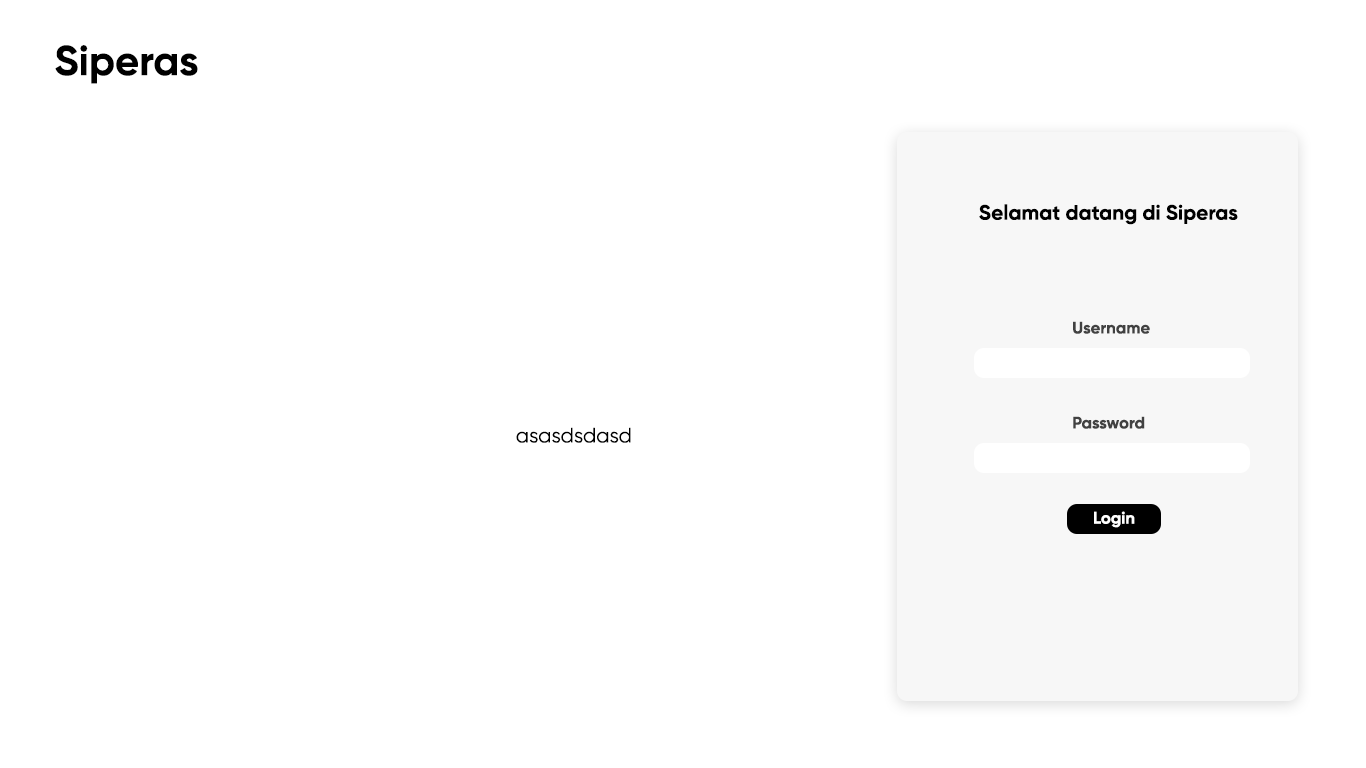
<style>
.page{position:relative;width:1366px;height:768px;background:#ffffff}
.page>*{position:absolute;margin:0}
.t1{font:41.7px "Gilroy-Bold";color:#000000}
.t2{font:20.8px "Gilroy-Bold";color:#000000}
.t3{font:16.7px "Gilroy-Bold";color:#414141}
.t4{font:20.8px "Gilroy-Regular";color:#000000}
.t5{font:16.7px "Gilroy-Bold";color:#ffffff}
</style>
<div class="page">
<p class="t1" style="left:55px;top:45px;width:143px;height:39px">Siperas</p>
<p class="t2" style="left:979px;top:204px;width:259px;height:21px">Selamat datang di Siperas</p>
<p class="t3" style="left:1073px;top:321px;width:77px;height:13px">Username</p>
<p class="t3" style="left:1073px;top:416px;width:72px;height:13px">Password</p>
<p class="t4" style="left:516px;top:427px;width:115px;height:16px">asasdsdasd</p>
<p class="t5" style="left:1094px;top:511px;width:41px;height:17px">Login</p>
</div>
